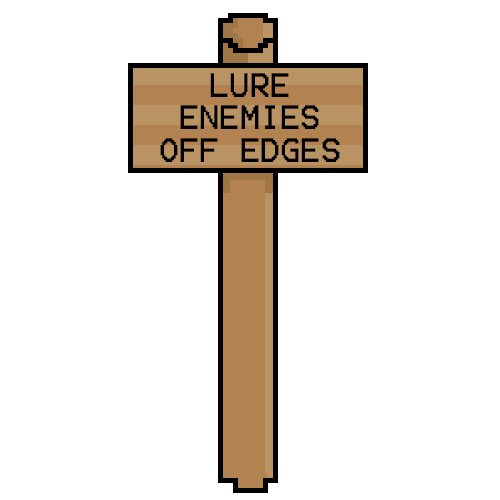
<style>
.page{position:relative;width:500px;height:500px;background:#ffffff}
.page>*{position:absolute;margin:0}
.t1{font:27px "Terminal";color:#000000}
</style>
<div class="page">
<p class="t1" style="left:160px;top:73px;width:180px;height:89px;text-align:center">LURE<br>ENEMIES<br>OFF EDGES</p>
</div>
